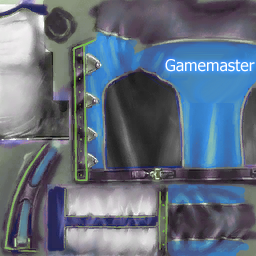
<style>
.page{position:relative;width:256px;height:256px}
.page>*{position:absolute;margin:0}
.t1{font:16px "Tahoma";color:#ffffff}
</style>
<div class="page">
<p class="t1" style="left:165px;top:59px;width:90px;height:13px">Gamemaster</p>
</div>
